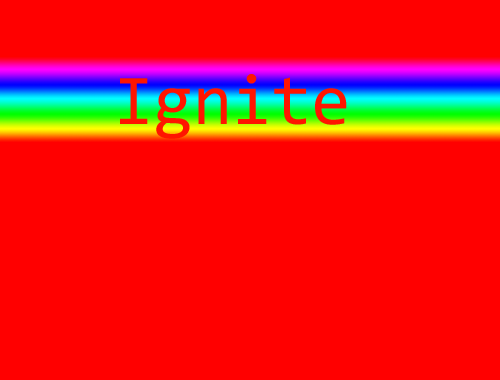
<style>
.page{position:relative;width:500px;height:380px;background:#ff0000}
.page>*{position:absolute;margin:0}
.t1{font:71.7px "Consolas";color:#ff1500}
</style>
<div class="page">
<p class="t1" style="left:120px;top:74px;width:227px;height:65px">Ignite</p>
</div>
